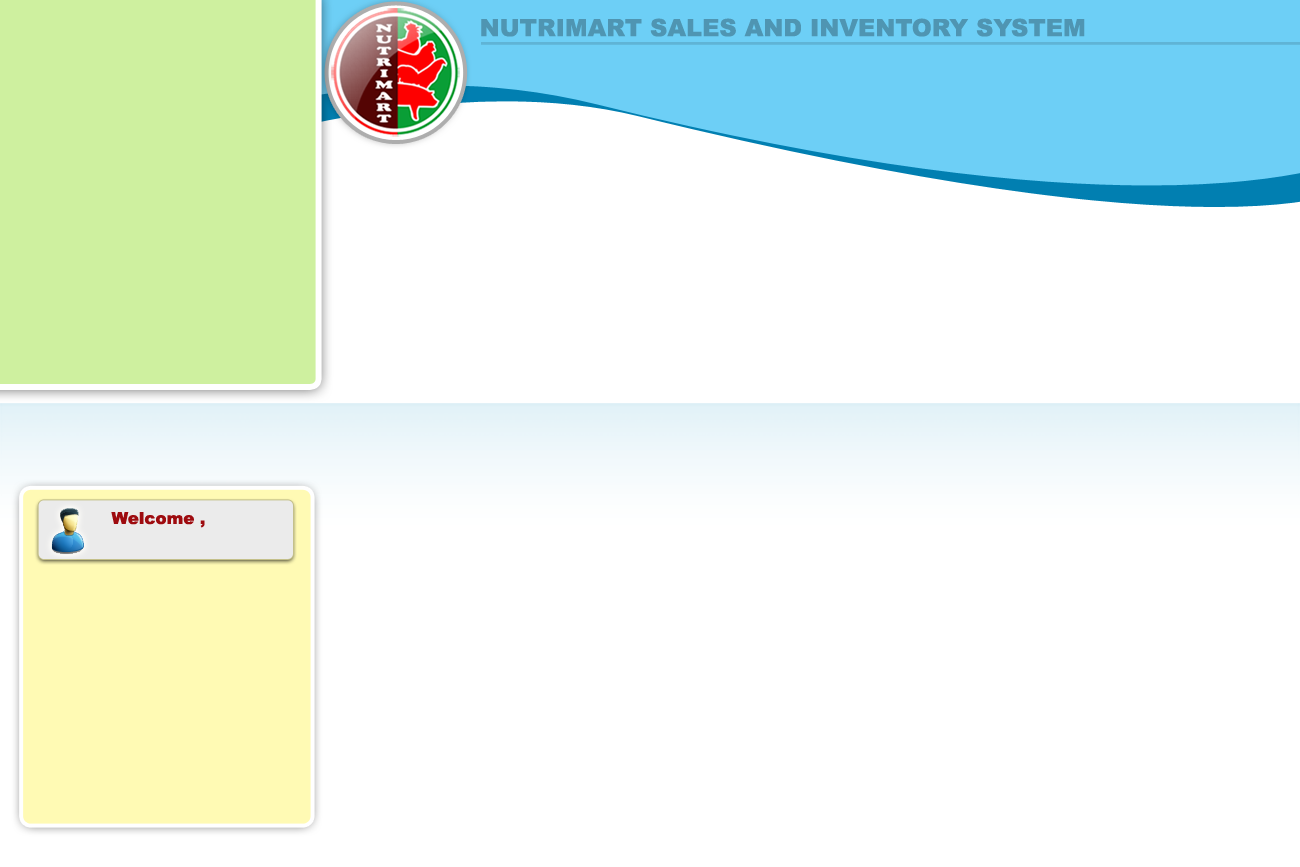
<style>
.page{position:relative;width:1300px;height:867px;background:#ffffff}
.page>*{position:absolute;margin:0}
.t1{font:24px "Arial-Black";color:#4f95b2}
.t2{font:16.7px "Arial-Black";color:#9e0b0f}
</style>
<div class="page">
<p class="t1" style="left:481px;top:18px;width:604px;height:19px">NUTRIMART SALES AND INVENTORY SYSTEM</p>
<p class="t2" style="left:111px;top:512px;width:94px;height:16px">Welcome ,</p>
</div>
